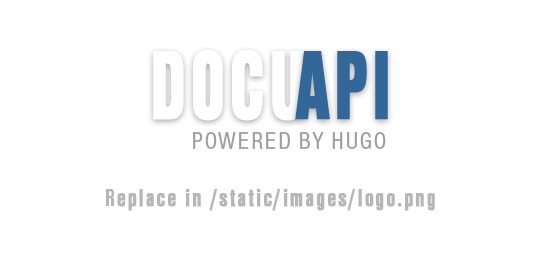
<style>
.page{position:relative;width:540px;height:264px;background:#ffffff}
.page>*{position:absolute;margin:0}
.t1{font:100px "NimbusSanCon-Bla";letter-spacing:0.06em;color:#ffffff;text-transform:uppercase;font-weight:bold;scale:0.66 1}
.t2{font:100px "NimbusSanCon-Bla";letter-spacing:0.06em;color:#336699;text-transform:uppercase;font-weight:bold;scale:0.66 1}
.t3{font:25px "NimbusSanCon-Reg";letter-spacing:0.06em;color:#9d9d9d;text-transform:uppercase}
.t4{font:25px "NimbusSanCon-Bol";letter-spacing:0.06em;color:#b7b6b6;font-weight:bold}
.t5{font:25px "NimbusSanCon-Bol";letter-spacing:0.06em;color:#b7b6b6;text-transform:uppercase}
</style>
<div class="page">
<p class="t1" style="left:153px;top:50px;width:150px;height:71px">Docu</p>
<p class="t2" style="left:295px;top:51px;width:93px;height:69px">API</p>
<p class="t3" style="left:193px;top:132px;width:193px;height:17px">Powered by Hugo</p>
<p class="t4" style="left:106px;top:189px;width:329px;height:22px"><span class="t5">R</span>eplace in /static/images/logo.png</p>
</div>
